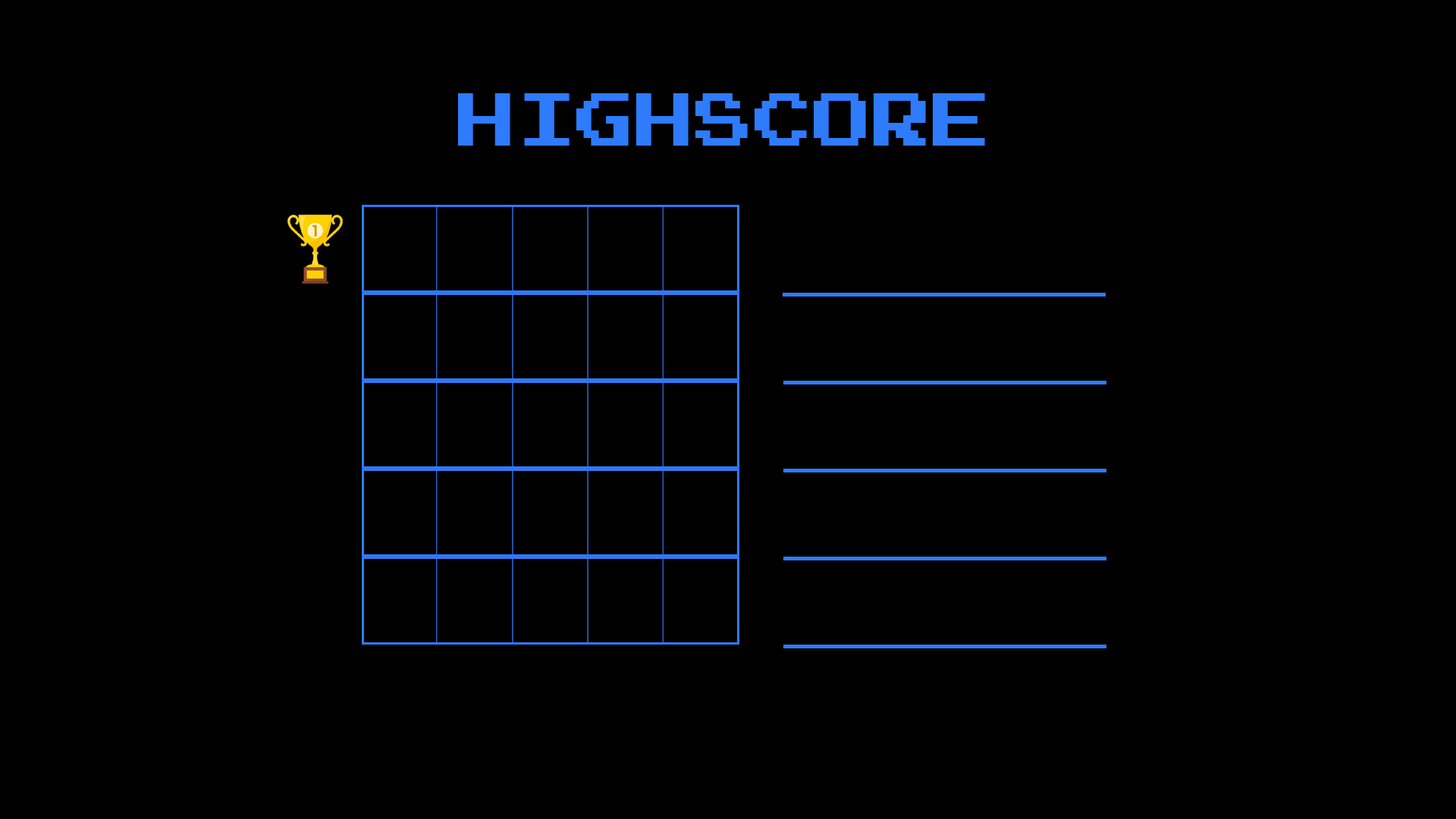
<style>
.page{position:relative;width:1456px;height:819px;background:#000000}
.page>*{position:absolute;margin:0}
.t1{font:60.7px "ArcadeNormal";color:#2e7bfb}
</style>
<div class="page">
<p class="t1" style="left:458px;top:93px;width:527px;height:53px">hIGHSCORE</p>
</div>
